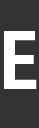
<style>
.page{position:relative;width:39px;height:128px;background:#333333}
.page>*{position:absolute;margin:0}
.t1{font:75px "AdobeGothicStd-Bold";color:#ffffff}
</style>
<div class="page">
<p class="t1" style="left:4px;top:31px;width:33px;height:58px">E</p>
</div>
